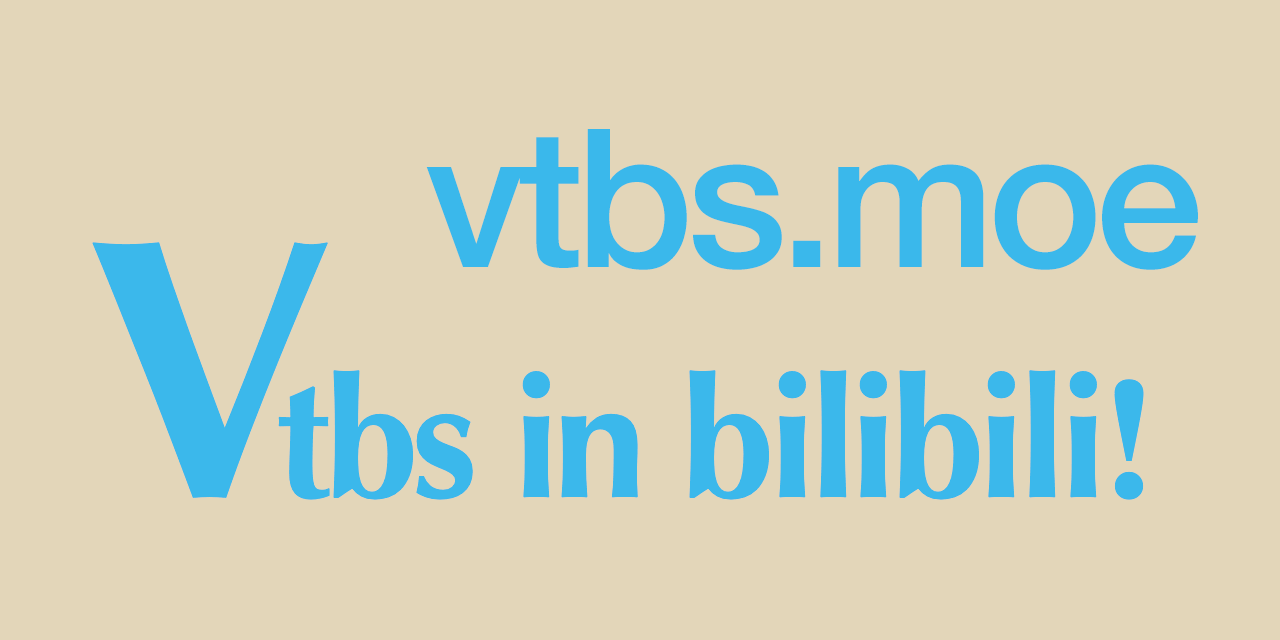
<style>
.page{position:relative;width:1280px;height:640px;background:#e3d6b9}
.page>*{position:absolute;margin:0}
.t1{font:192.7px "HelveticaNeue-Medium";letter-spacing:-0.035em;color:#3ab8eb}
.t2{font:167.7px "Optima-Bold";letter-spacing:-0.035em;color:#3bb8eb}
.t3{font:370.7px "Optima-Bold";letter-spacing:-0.155em;color:#3bb8eb}
</style>
<div class="page">
<p class="t1" style="left:426px;top:129px;width:772px;height:141px">vtbs.moe</p>
<p class="t2" style="left:92px;top:242px;width:1052px;height:258px"><span class="t3">V</span>tbs in bilibili!</p>
</div>
